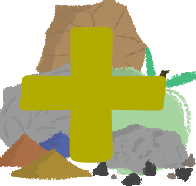
<style>
.page{position:relative;width:196px;height:186px;background:#ffffff}
.page>*{position:absolute;margin:0}
.t1{font:317.4px "BerlinSansFB-Reg";letter-spacing:-0.007em;color:#b1ab00;font-weight:bold;scale:1.21 1}
</style>
<div class="page">
<p class="t1" style="left:19px;top:26px;width:148px;height:137px">+</p>
</div>
